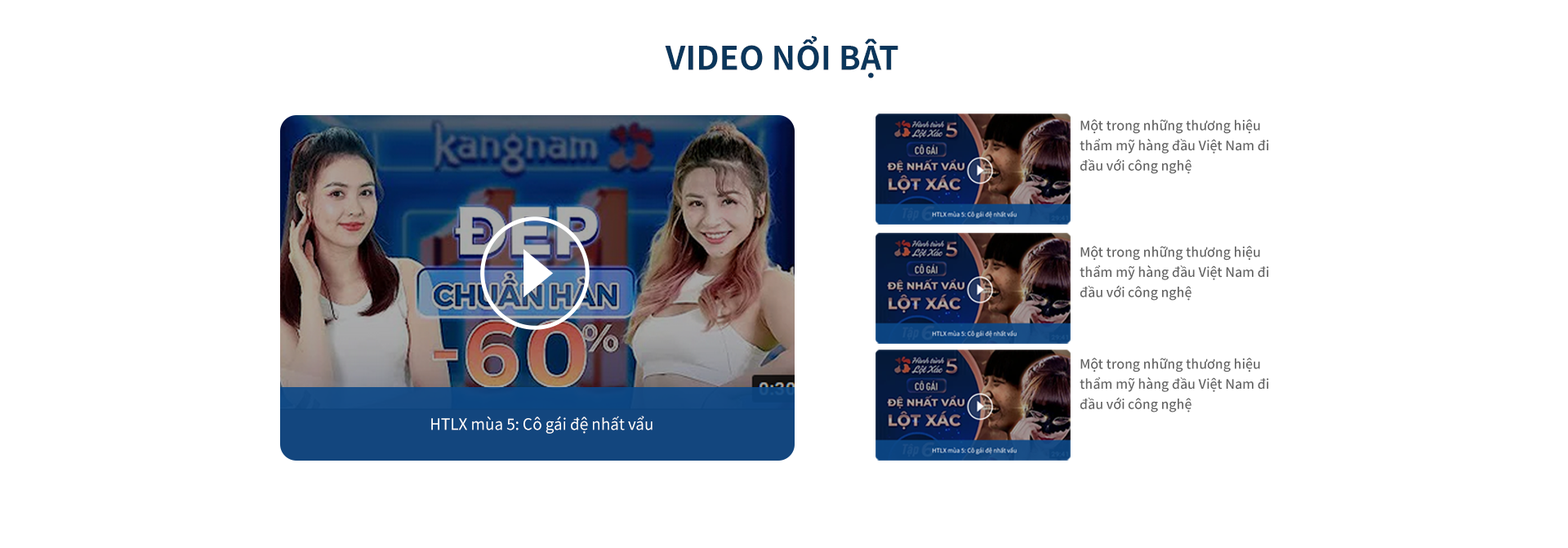
<style>
.page{position:relative;width:1568px;height:548px;background:#ffffff}
.page>*{position:absolute;margin:0}
.t1{font:32.7px "NotoSansKR-Bold";color:#0b365b}
.t2{font:13.1px/20.2px "NotoSansKR-Medium";color:#636363}
.t3{font:15.5px "NotoSansKR-Regular";color:#ffffff}
</style>
<div class="page">
<p class="t1" style="left:665px;top:36px;width:233px;height:42px">VIDEO NỔI BẬT</p>
<p class="t2" style="left:1080px;top:119px;width:189px;height:55px">Một trong những thương hiệu thẩm mỹ hàng đầu Việt Nam đi đầu với công nghệ</p>
<p class="t2" style="left:1080px;top:246px;width:189px;height:55px">Một trong những thương hiệu thẩm mỹ hàng đầu Việt Nam đi đầu với công nghệ</p>
<p class="t2" style="left:1080px;top:358px;width:189px;height:54px">Một trong những thương hiệu thẩm mỹ hàng đầu Việt Nam đi đầu với công nghệ</p>
<p class="t3" style="left:431px;top:416px;width:222px;height:18px">HTLX mùa 5: Cô gái đệ nhất vẩu</p>
</div>
